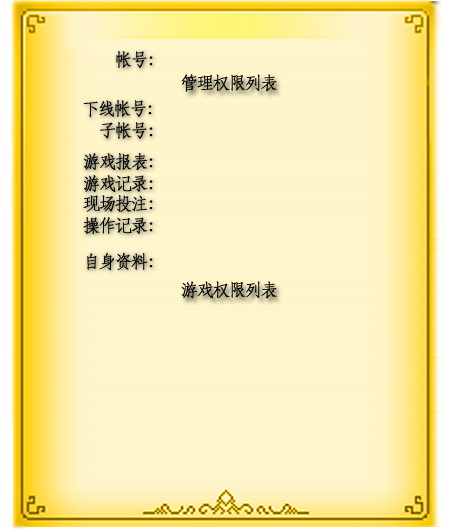
<style>
.page{position:relative;width:449px;height:532px}
.page>*{position:absolute;margin:0}
.t1{font:18px "STFangsong";letter-spacing:-0.14em;color:#000000;font-weight:bold}
.t2{font:18px "STFangsong";letter-spacing:-0.14em;color:#010101;font-weight:bold}
</style>
<div class="page">
<p class="t1" style="left:116px;top:51px;width:37px;height:17px">帐号：</p>
<p class="t2" style="left:181px;top:74px;width:96px;height:18px">管理权限列表</p>
<p class="t1" style="left:83px;top:100px;width:69px;height:18px">下线帐号：</p>
<p class="t1" style="left:100px;top:122px;width:53px;height:17px">子帐号：</p>
<p class="t1" style="left:83px;top:153px;width:70px;height:17px">游戏报表：</p>
<p class="t1" style="left:83px;top:175px;width:70px;height:17px">游戏记录：</p>
<p class="t1" style="left:83px;top:195px;width:70px;height:17px">现场投注：</p>
<p class="t1" style="left:83px;top:217px;width:70px;height:18px">操作记录：</p>
<p class="t1" style="left:87px;top:252px;width:66px;height:19px">自身资料：</p>
<p class="t2" style="left:181px;top:281px;width:96px;height:18px">游戏权限列表</p>
</div>
